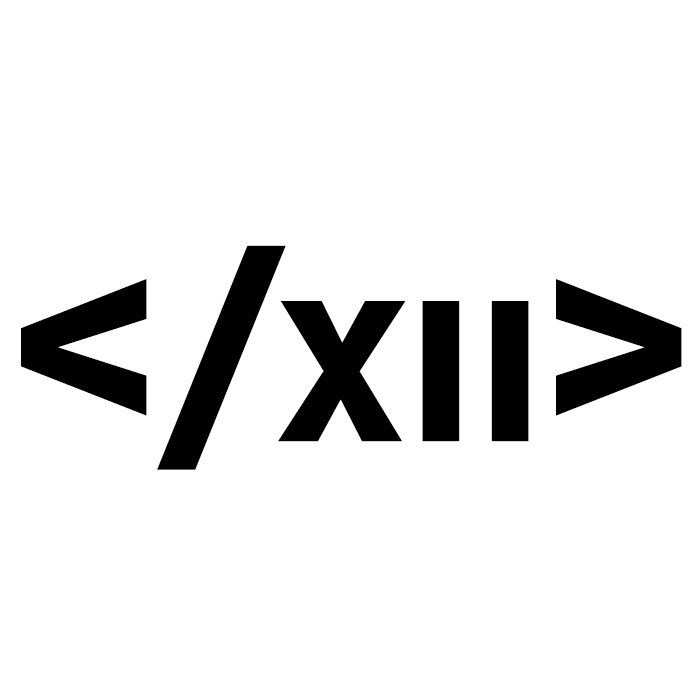
<style>
.page{position:relative;width:700px;height:700px;background:#ffffff}
.page>*{position:absolute;margin:0}
.t1{font:276.1px "HindMadurai-Bold";color:#000000;scale:0.91 1}
</style>
<div class="page">
<p class="t1" style="left:21px;top:237px;width:661px;height:233px">&lt;/xii&gt;</p>
</div>
